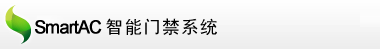
<style>
.page{position:relative;width:380px;height:49px}
.page>*{position:absolute;margin:0}
.t1{font:18px "ArialMT";letter-spacing:-0.075em;color:#000000;font-weight:bold}
.t2{font:18px "SimHei";letter-spacing:0.05em;color:#000000}
</style>
<div class="page">
<p class="t1" style="left:35px;top:20px;width:67px;height:14px">SmartAC</p>
<p class="t2" style="left:106px;top:18px;width:111px;height:18px">智能门禁系统</p>
</div>
